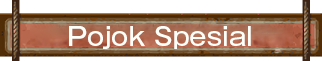
<style>
.page{position:relative;width:322px;height:61px;background:#ffffff}
.page>*{position:absolute;margin:0}
.t1{font:25px "GothicMB101Pro-Medium";color:#fffffa}
</style>
<div class="page">
<p class="t1" style="left:69px;top:26px;width:182px;height:23px">Pojok Spesial</p>
</div>
